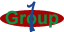
<style>
.page{position:relative;width:64px;height:32px;background:#ffffff}
.page>*{position:absolute;margin:0}
.t1{font:48px "Harrington";color:#1c468d}
.t2{font:18px "Arial-BoldMT";color:#0f8f45}
</style>
<div class="page">
<p class="t1" style="left:26px;top:1px;width:10px;height:32px">1</p>
<p class="t2" style="left:5px;top:10px;width:54px;height:18px">Group</p>
</div>
